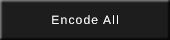
<style>
.page{position:relative;width:170px;height:40px;background:#1d1d1d}
.page>*{position:absolute;margin:0}
.t1{font:12px "LiberationSans";letter-spacing:0.1em;color:#ffffff}
</style>
<div class="page">
<p class="t1" style="left:52px;top:15px;width:66px;height:9px">Encode All</p>
</div>
